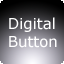
<style>
.page{position:relative;width:64px;height:64px}
.page>*{position:absolute;margin:0}
.t1{font:14.9px "Verdana";color:#ffffff}
</style>
<div class="page">
<p class="t1" style="left:9px;top:17px;width:48px;height:31px">Digital<br>Button</p>
</div>
